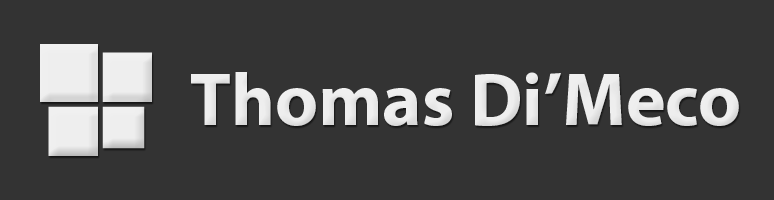
<style>
.page{position:relative;width:774px;height:200px;background:#333333}
.page>*{position:absolute;margin:0}
.t1{font:75px "MyriadPro-Bold";color:#eeeeee}
</style>
<div class="page">
<p class="t1" style="left:191px;top:72px;width:548px;height:54px">Thomas Di’Meco</p>
</div>
